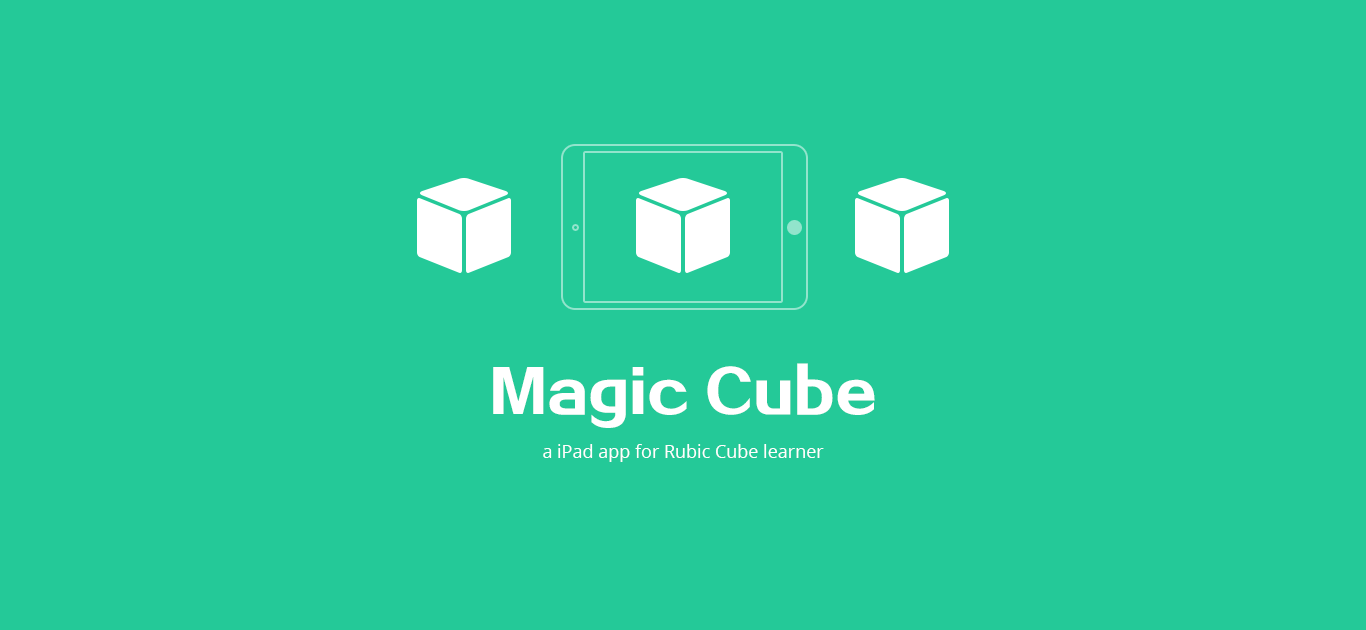
<style>
.page{position:relative;width:1366px;height:630px;background:#24c998}
.page>*{position:absolute;margin:0}
.t1{font:56px "FZZDHJW--GB1-0";color:#ffffff}
.t2{font:18px "OpenSans";color:#ffffff}
</style>
<div class="page">
<p class="t1" style="left:493px;top:363px;width:382px;height:65px">Magic Cube</p>
<p class="t2" style="left:543px;top:444px;width:281px;height:18px">a iPad app for Rubic Cube learner</p>
</div>
